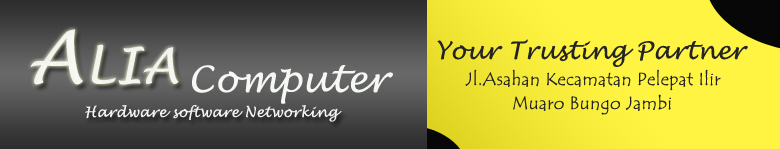
<style>
.page{position:relative;width:780px;height:149px}
.page>*{position:absolute;margin:0}
.t1{font:24px "LucidaHandwriting-Italic";letter-spacing:0.02em;color:#242424}
.t2{font:18px "TempusSansITC";letter-spacing:0.02em;color:#242424}
</style>
<div class="page">
<p class="t1" style="left:437px;top:39px;width:311px;height:28px">Your Trusting Partner</p>
<p class="t2" style="left:465px;top:69px;width:256px;height:22px">Jl.Asahan Kecamatan Pelepat Ilir</p>
<p class="t2" style="left:513px;top:94px;width:158px;height:21px">Muaro Bungo Jambi</p>
</div>
